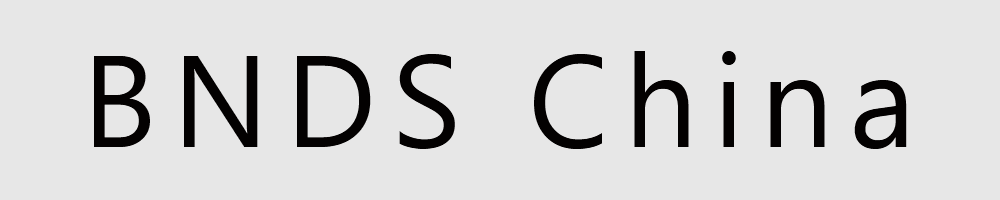
<style>
.page{position:relative;width:1000px;height:200px;background:#e7e7e7}
.page>*{position:absolute;margin:0}
.t1{font:130px "SegoeUI";letter-spacing:0.12em;color:#030101}
</style>
<div class="page">
<p class="t1" style="left:94px;top:51px;width:813px;height:98px">BNDS China</p>
</div>
